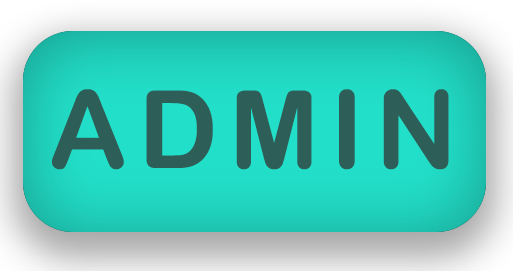
<style>
.page{position:relative;width:513px;height:271px}
.page>*{position:absolute;margin:0}
.t1{font:108.3px "ArialRoundedMTBold";letter-spacing:0.1em;color:#2e5e58}
</style>
<div class="page">
<p class="t1" style="left:52px;top:89px;width:397px;height:81px">ADMIN</p>
</div>
